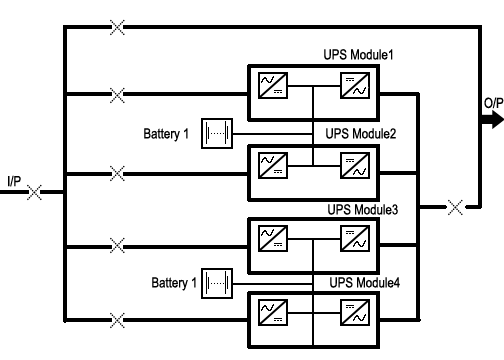
<style>
.page{position:relative;width:504px;height:360px;background:#ffffff}
.page>*{position:absolute;margin:0}
.t1{font:14px "ArialNarrow";color:#000000}
</style>
<div class="page">
<p class="t1" style="left:324px;top:49px;width:69px;height:11px">UPS Module1</p>
<p class="t1" style="left:484px;top:97px;width:20px;height:12px">O/P</p>
<p class="t1" style="left:144px;top:128px;width:44px;height:14px">Battery 1</p>
<p class="t1" style="left:326px;top:128px;width:70px;height:11px">UPS Module2</p>
<p class="t1" style="left:8px;top:175px;width:13px;height:12px">I/P</p>
<p class="t1" style="left:328px;top:204px;width:70px;height:11px">UPS Module3</p>
<p class="t1" style="left:152px;top:277px;width:44px;height:14px">Battery 1</p>
<p class="t1" style="left:330px;top:277px;width:70px;height:11px">UPS Module4</p>
</div>
